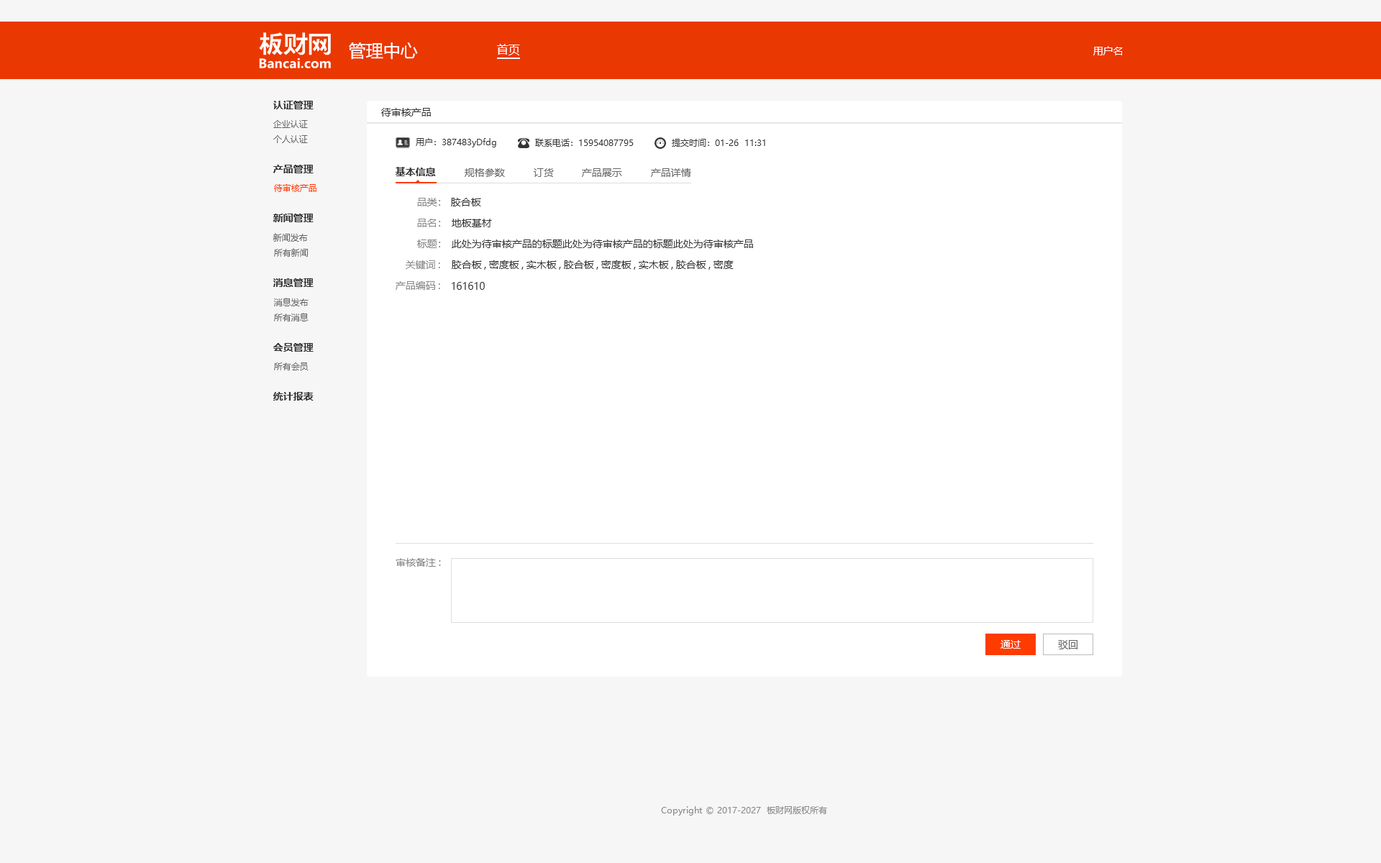
<style>
.page{position:relative;width:1381px;height:863px;background:#f6f6f6}
.page>*{position:absolute;margin:0}
.t1{font:17.3px "MicrosoftYaHei";color:#ffffff}
.t2{font:11.5px "MicrosoftYaHei";color:#ffffff}
.t3{font:10.1px "MicrosoftYaHei";color:#ffffff}
.t4{font:10.1px "MicrosoftYaHei-Bold";color:#333333}
.t5{font:10.1px "MicrosoftYaHei";color:#333333}
.t6{font:8.6px "MicrosoftYaHei";color:#666666}
.t7{font:8.6px "MicrosoftYaHei";color:#333333}
.t8{font:10.1px "MicrosoftYaHei";color:#666666}
.t9{font:8.6px "MicrosoftYaHei";color:#ff3c00}
.t10{font:10.1px "MicrosoftYaHei";color:#888888}
.t11{font:8.6px "MicrosoftYaHei";color:#888888}
</style>
<div class="page">
<p class="t1" style="left:349px;top:42px;width:69px;height:18px">管理中心</p>
<p class="t2" style="left:497px;top:44px;width:23px;height:11px">首页</p>
<p class="t3" style="left:1094px;top:46px;width:29px;height:9px">用户名</p>
<p class="t4" style="left:273px;top:101px;width:41px;height:8px">认证管理</p>
<p class="t5" style="left:381px;top:108px;width:50px;height:9px">待审核产品</p>
<p class="t6" style="left:273px;top:120px;width:35px;height:8px">企业认证</p>
<p class="t6" style="left:273px;top:135px;width:35px;height:8px">个人认证</p>
<p class="t7" style="left:416px;top:138px;width:80px;height:9px">用户：387483yDfdg</p>
<p class="t7" style="left:535px;top:139px;width:99px;height:8px">联系电话：15954087795</p>
<p class="t7" style="left:672px;top:139px;width:93px;height:8px">提交时间：01-26  11:31</p>
<p class="t4" style="left:273px;top:165px;width:41px;height:8px">产品管理</p>
<p class="t4" style="left:396px;top:167px;width:40px;height:9px">基本信息</p>
<p class="t8" style="left:465px;top:168px;width:40px;height:9px">规格参数</p>
<p class="t8" style="left:533px;top:168px;width:21px;height:9px">订货</p>
<p class="t8" style="left:582px;top:168px;width:40px;height:9px">产品展示</p>
<p class="t8" style="left:651px;top:168px;width:40px;height:9px">产品详情</p>
<p class="t9" style="left:274px;top:184px;width:43px;height:8px">待审核产品</p>
<p class="t10" style="left:417px;top:198px;width:23px;height:8px">品类：</p>
<p class="t5" style="left:451px;top:198px;width:30px;height:8px">胶合板</p>
<p class="t4" style="left:273px;top:214px;width:41px;height:8px">新闻管理</p>
<p class="t10" style="left:417px;top:219px;width:23px;height:8px">品名：</p>
<p class="t5" style="left:452px;top:219px;width:40px;height:8px">地板基材</p>
<p class="t6" style="left:273px;top:233px;width:35px;height:9px">新闻发布</p>
<p class="t10" style="left:417px;top:240px;width:23px;height:8px">标题：</p>
<p class="t5" style="left:452px;top:240px;width:301px;height:8px">此处为待审核产品的标题此处为待审核产品的标题此处为待审核产品</p>
<p class="t6" style="left:274px;top:248px;width:34px;height:9px">所有新闻</p>
<p class="t10" style="left:406px;top:260px;width:34px;height:9px">关键词:</p>
<p class="t5" style="left:452px;top:260px;width:282px;height:10px">胶合板,密度板,实木板,胶合板,密度板,实木板,胶合板,密度</p>
<p class="t4" style="left:273px;top:278px;width:41px;height:9px">消息管理</p>
<p class="t10" style="left:396px;top:281px;width:44px;height:9px">产品编码:</p>
<p class="t5" style="left:452px;top:282px;width:33px;height:8px">161610</p>
<p class="t6" style="left:274px;top:298px;width:35px;height:8px">消息发布</p>
<p class="t6" style="left:274px;top:313px;width:35px;height:9px">所有消息</p>
<p class="t4" style="left:273px;top:343px;width:41px;height:9px">会员管理</p>
<p class="t6" style="left:274px;top:363px;width:35px;height:7px">所有会员</p>
<p class="t4" style="left:273px;top:392px;width:41px;height:9px">统计报表</p>
<p class="t10" style="left:396px;top:558px;width:45px;height:9px">审核备注:</p>
<p class="t3" style="left:1001px;top:640px;width:20px;height:9px">通过</p>
<p class="t8" style="left:1058px;top:640px;width:20px;height:10px">驳回</p>
<p class="t11" style="left:661px;top:806px;width:166px;height:10px">Copyright © 2017-2027  板财网版权所有</p>
</div>
